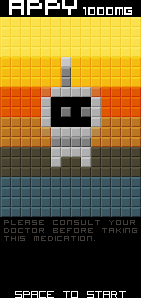
<style>
.page{position:relative;width:141px;height:298px;background:#000000}
.page>*{position:absolute;margin:0}
.t1{font:30px "VisitorTT1BRK";color:#ffffff}
.t2{font:15.3px "VisitorTT1BRK";color:#ffffff}
.t3{font:14px/8px "VisitorTT2BRK";color:#423d38}
.t4{font:18px "VisitorTT2BRK";color:#ffffff}
</style>
<div class="page">
<p class="t1" style="left:9px;top:0px;width:68px;height:15px">APPY</p>
<p class="t2" style="left:83px;top:7px;width:49px;height:8px">1000mg</p>
<p class="t3" style="left:4px;top:220px;width:133px;height:21px">Please consult your<br>doctor before taking <br>this medication.</p>
<p class="t4" style="left:15px;top:291px;width:111px;height:7px">SPACE TO START</p>
</div>
